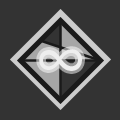
<style>
.page{position:relative;width:120px;height:120px;background:#333333}
.page>*{position:absolute;margin:0}
.t1{font:60px "SourceSansPro-Regular";color:#ffffff}
</style>
<div class="page">
<p class="t1" style="left:39px;top:49px;width:43px;height:22px">∞</p>
</div>
